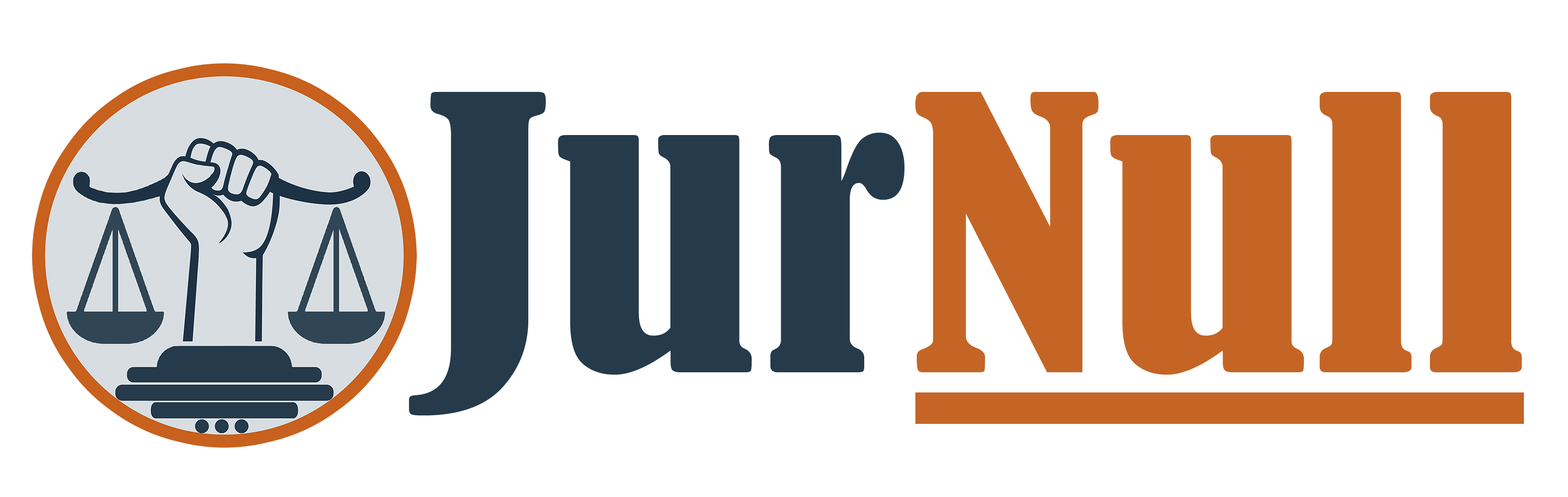
<style>
.page{position:relative;width:1568px;height:497px;background:#ffffff}
.page>*{position:absolute;margin:0}
.t1{font:356.3px "BernardMT-Condensed";color:#c46526;scale:1.19 1}
.t2{font:356.3px "BernardMT-Condensed";color:#253a4b;scale:1.19 1}
</style>
<div class="page">
<p class="t1" style="left:409px;top:92px;width:1113px;height:324px"><span class="t2">Jur</span>Null</p>
</div>
